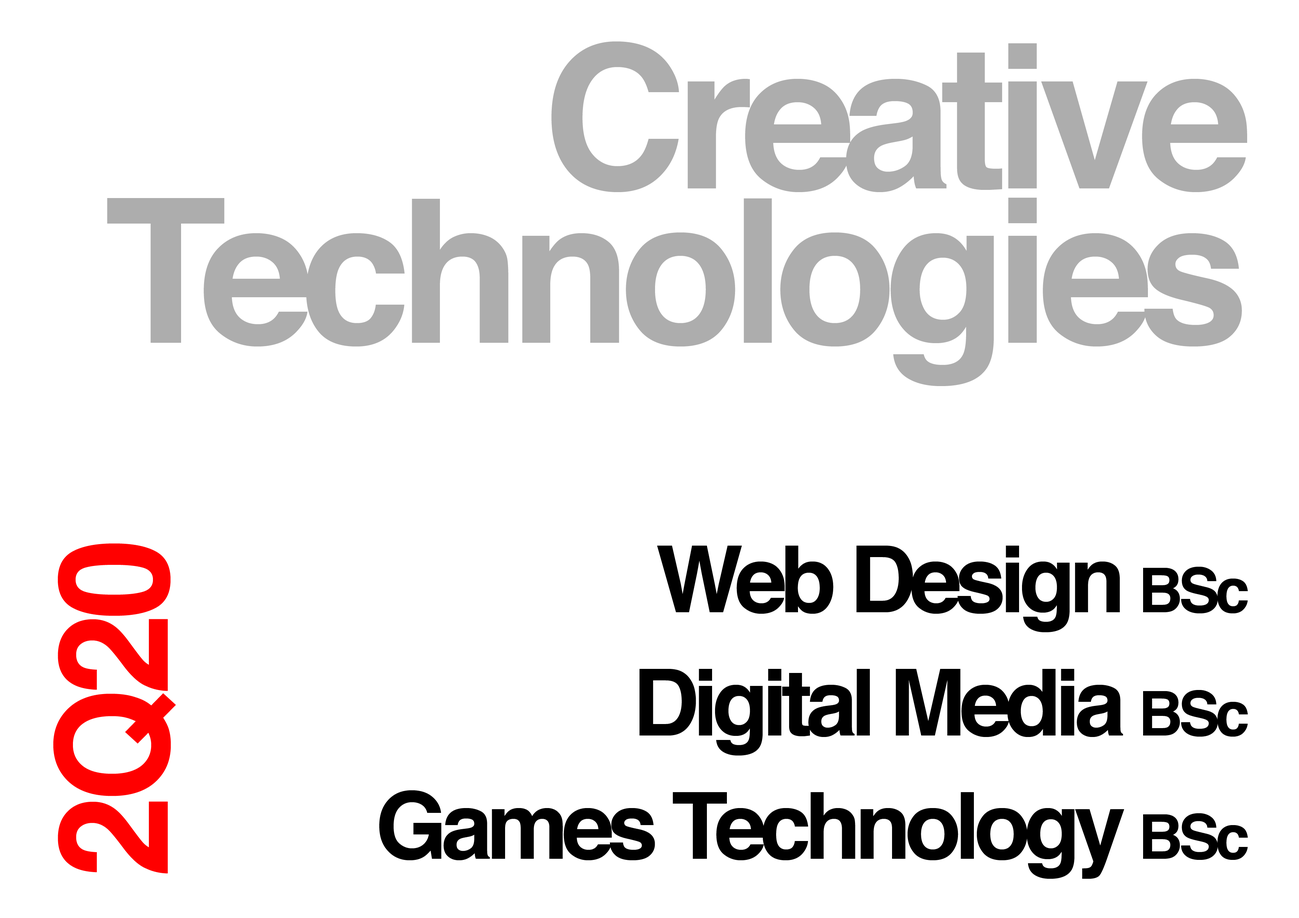
<style>
.page{position:relative;width:1299px;height:918px;background:#ffffff}
.page>*{position:absolute;margin:0}
.t1{font:200.5px/154.3px "Helvetica-Bold";letter-spacing:-0.06em;color:#adadad}
.t2{font:154.3px "Helvetica-Bold";letter-spacing:-0.05em;color:#ff0000;scale:0.96 1}
.t3{font:92.6px/123.4px "Helvetica-Bold";letter-spacing:-0.07em;color:#000000}
.t4{font:61.7px/123.4px "Helvetica-Bold";letter-spacing:-0.07em;color:#000000}
</style>
<div class="page">
<p class="t1" style="left:107px;top:41px;width:1140px;height:345px;text-align:right">Creative Technologies</p>
<p class="t2" style="left:53px;top:543px;width:123px;height:331px;rotate:-90deg">2Q20</p>
<p class="t3" style="left:379px;top:546px;width:869px;height:333px;text-align:right">Web Design <span class="t4">BSc<br></span>Digital Media <span class="t4">BSc<br></span>Games Technology <span class="t4">BSc</span></p>
</div>
